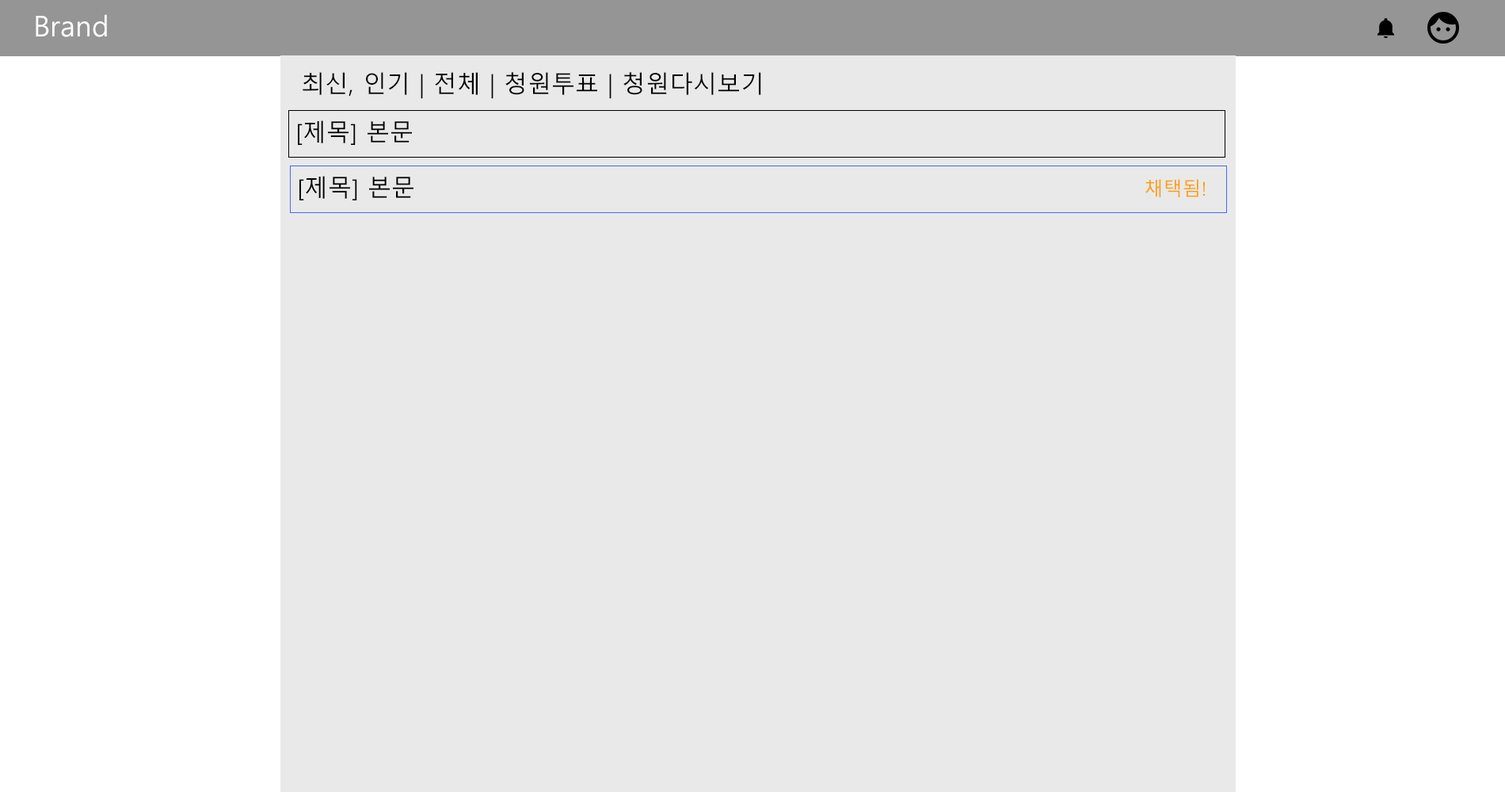
<style>
.page{position:relative;width:1505px;height:792px;background:#e9e9e9}
.page>*{position:absolute;margin:0}
.t1{font:28.5px "MalgunGothic";color:#ffffff}
.t2{font:23.8px "MalgunGothic";color:#000000}
.t3{font:19px "MalgunGothic";color:#ff9c00}
</style>
<div class="page">
<p class="t1" style="left:36px;top:14px;width:71px;height:23px">Brand</p>
<p class="t2" style="left:303px;top:72px;width:458px;height:27px">최신, 인기 | 전체 | 청원투표 | 청원다시보기</p>
<p class="t2" style="left:298px;top:120px;width:114px;height:25px">[제목] 본문</p>
<p class="t2" style="left:299px;top:176px;width:115px;height:24px">[제목] 본문</p>
<p class="t3" style="left:1146px;top:179px;width:60px;height:18px">채택됨!</p>
</div>
